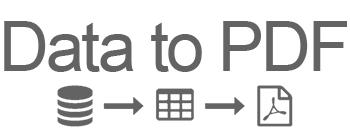
<style>
.page{position:relative;width:350px;height:138px;background:#ffffff}
.page>*{position:absolute;margin:0}
.t1{font:68.9px "ArialMT";letter-spacing:-0.041em;color:#636363}
</style>
<div class="page">
<p class="t1" style="left:4px;top:21px;width:343px;height:51px">Data to PDF</p>
</div>
